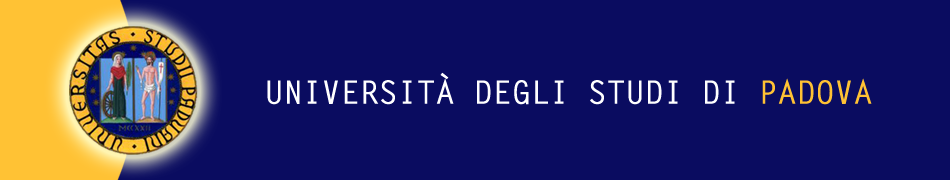
<style>
.page{position:relative;width:950px;height:180px;background:#0a0c60}
.page>*{position:absolute;margin:0}
.t1{font:32px "LetterGothicStd-Bold";color:#ffffff;text-transform:uppercase}
.t2{font:32px "LetterGothicStd-Bold";color:#ffc234;text-transform:uppercase}
</style>
<div class="page">
<p class="t1" style="left:267px;top:72px;width:605px;height:33px">Università DEGLI STUDI di <span class="t2">PADOVA</span></p>
</div>
